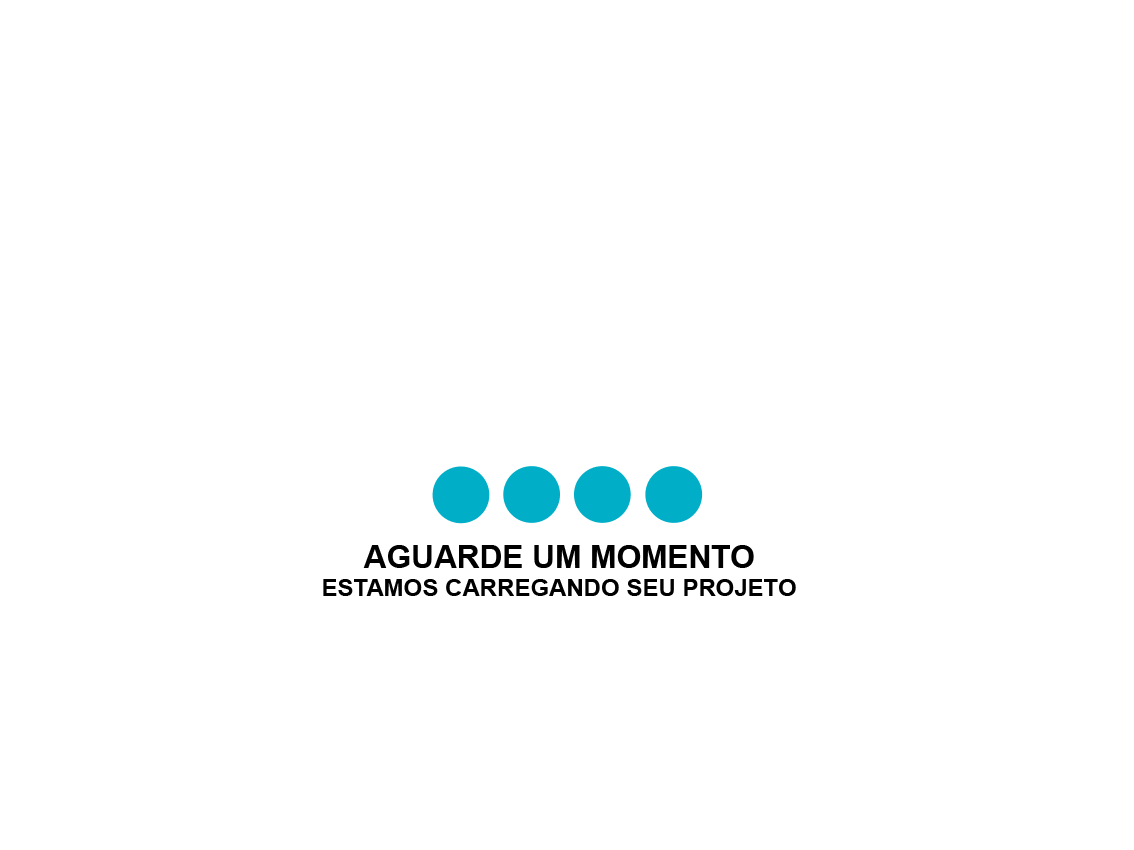
<style>
.page{position:relative;width:1134px;height:850px;background:#ffffff}
.page>*{position:absolute;margin:0}
.t1{font:24px "Arial-BoldMT";color:#000000}
.t2{font:31.6px "Arial-BoldMT";color:#000000}
</style>
<div class="page">
<p class="t1" style="left:323px;top:545px;width:473px;height:51px;text-align:center"><span class="t2">AGUARDE UM MOMENTO<br></span>ESTAMOS CARREGANDO SEU PROJETO</p>
</div>
